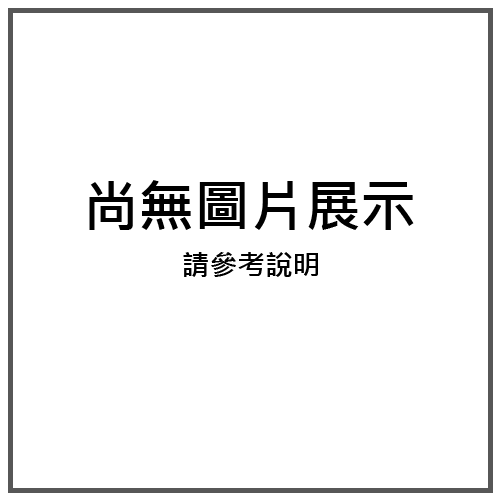
<style>
.page{position:relative;width:500px;height:500px;background:#ffffff}
.page>*{position:absolute;margin:0}
.t1{font:55.6px "MicrosoftJhengHeiBold";color:#000000}
.t2{font:27.8px "MicrosoftJhengHeiBold";color:#000000}
</style>
<div class="page">
<p class="t1" style="left:89px;top:180px;width:325px;height:50px">尚無圖片展示</p>
<p class="t2" style="left:183px;top:252px;width:135px;height:25px">請參考說明</p>
</div>
